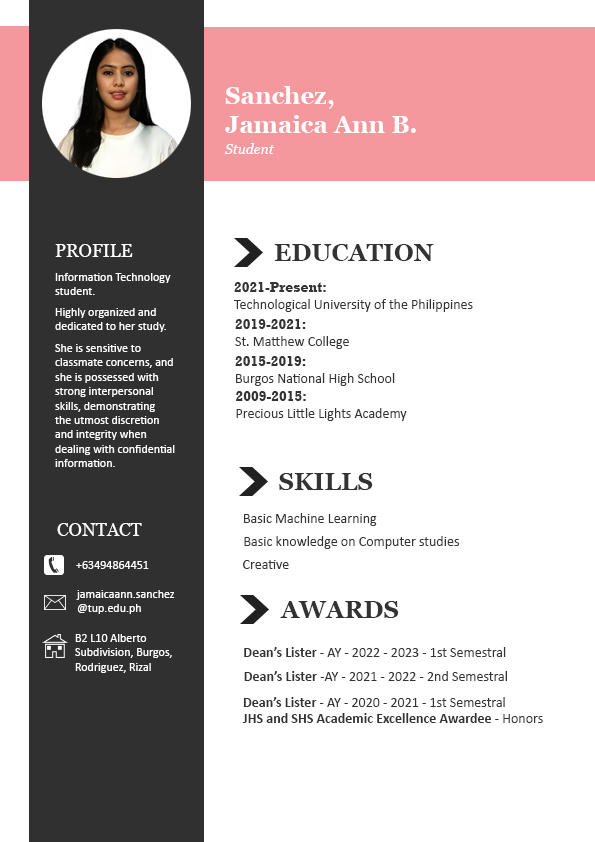
<style>
.page{position:relative;width:595px;height:842px;background:#ffffff}
.page>*{position:absolute;margin:0}
.t1{font:24px "Georgia-Bold";color:#ffffff}
.t2{font:14px "Georgia-Italic";color:#ffffff}
.t3{font:18px "Georgia";color:#ffffff}
.t4{font:24px "Georgia-Bold";color:#333333}
.t5{font:12px "Calibri";color:#ffffff}
.t6{font:14px "Calibri";color:#333333}
.t7{font:14px "Rockwell-Bold";color:#333333}
.t8{font:14px "Calibri-Bold";color:#333333}
</style>
<div class="page">
<p class="t1" style="left:225px;top:86px;width:191px;height:47px">Sanchez,<br>Jamaica Ann B.</p>
<p class="t2" style="left:224px;top:143px;width:51px;height:11px">Student</p>
<p class="t3" style="left:55px;top:244px;width:78px;height:13px">PROFILE</p>
<p class="t4" style="left:274px;top:244px;width:160px;height:17px">EDUCATION</p>
<p class="t5" style="left:55px;top:273px;width:116px;height:22px">Information Technology <br>student.</p>
<p class="t6" style="left:234px;top:282px;width:239px;height:30px"><span class="t7">2021-Present:  <br></span>Technological University of the Philippines</p>
<p class="t5" style="left:55px;top:308px;width:111px;height:24px">Highly organized and <br>dedicated to her study.</p>
<p class="t6" style="left:235px;top:319px;width:114px;height:30px"><span class="t7">2019-2021: <br></span>St. Matthew College</p>
<p class="t5" style="left:55px;top:344px;width:120px;height:123px">She is sensitive to <br>classmate concerns, and <br>she is possessed with <br>strong interpersonal <br>skills, demonstrating <br>the utmost discretion <br>and integrity when <br>dealing with confidential <br>information.</p>
<p class="t6" style="left:235px;top:356px;width:160px;height:30px"><span class="t7">2015-2019: <br></span>Burgos National High School</p>
<p class="t6" style="left:236px;top:391px;width:171px;height:30px"><span class="t7">2009-2015: <br></span>Precious Little Lights Academy</p>
<p class="t4" style="left:279px;top:473px;width:94px;height:17px">SKILLS</p>
<p class="t6" style="left:244px;top:513px;width:133px;height:13px">Basic Machine Learning</p>
<p class="t3" style="left:57px;top:523px;width:85px;height:13px">CONTACT</p>
<p class="t6" style="left:244px;top:536px;width:215px;height:13px">Basic knowledge on Computer studies</p>
<p class="t5" style="left:76px;top:561px;width:73px;height:8px">+63494864451</p>
<p class="t6" style="left:243px;top:560px;width:46px;height:9px">Creative</p>
<p class="t5" style="left:76px;top:590px;width:99px;height:24px">jamaicaann.sanchez<br>@tup.edu.ph</p>
<p class="t4" style="left:280px;top:601px;width:119px;height:17px">AWARDS</p>
<p class="t5" style="left:75px;top:634px;width:97px;height:39px">B2 L10 Alberto <br>Subdivision, Burgos,<br>Rodriguez, Rizal</p>
<p class="t6" style="left:244px;top:647px;width:262px;height:10px"><span class="t8">Dean’s Lister </span>- AY - 2022 - 2023 - 1st Semestral</p>
<p class="t6" style="left:244px;top:671px;width:263px;height:10px"><span class="t8">Dean’s Lister </span>-AY - 2021 - 2022 - 2nd Semestral</p>
<p class="t8" style="left:242px;top:697px;width:301px;height:26px">Dean’s Lister <span class="t6">- AY - 2020 - 2021 - 1st Semestral<br></span>JHS and SHS Academic Excellence Awardee<span class="t6"> - Honors</span></p>
</div>
